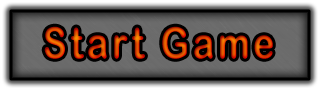
<style>
.page{position:relative;width:321px;height:91px}
.page>*{position:absolute;margin:0}
.t1{font:43.2px "ArialRoundedMTBold";letter-spacing:0.1em;scale:0.83 1}
</style>
<div class="page">
<p class="t1" style="left:44px;top:26px;width:229px;height:33px">Start Game</p>
</div>
